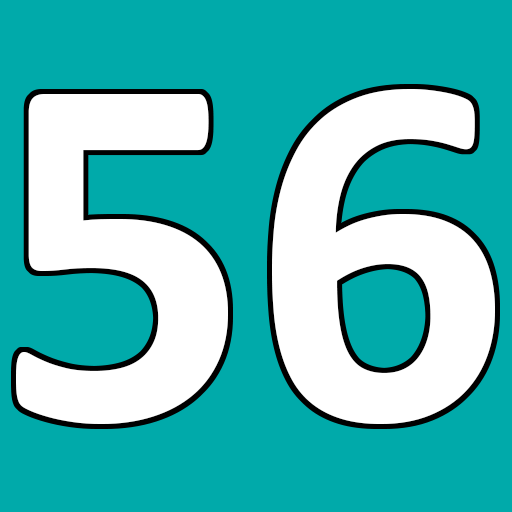
<style>
.page{position:relative;width:512px;height:512px;background:#00aaaa}
.page>*{position:absolute;margin:0}
.t1{font:511.5px "Calibri-Bold";color:#ffffff}
</style>
<div class="page">
<p class="t1" style="left:16px;top:89px;width:479px;height:335px">56</p>
</div>
